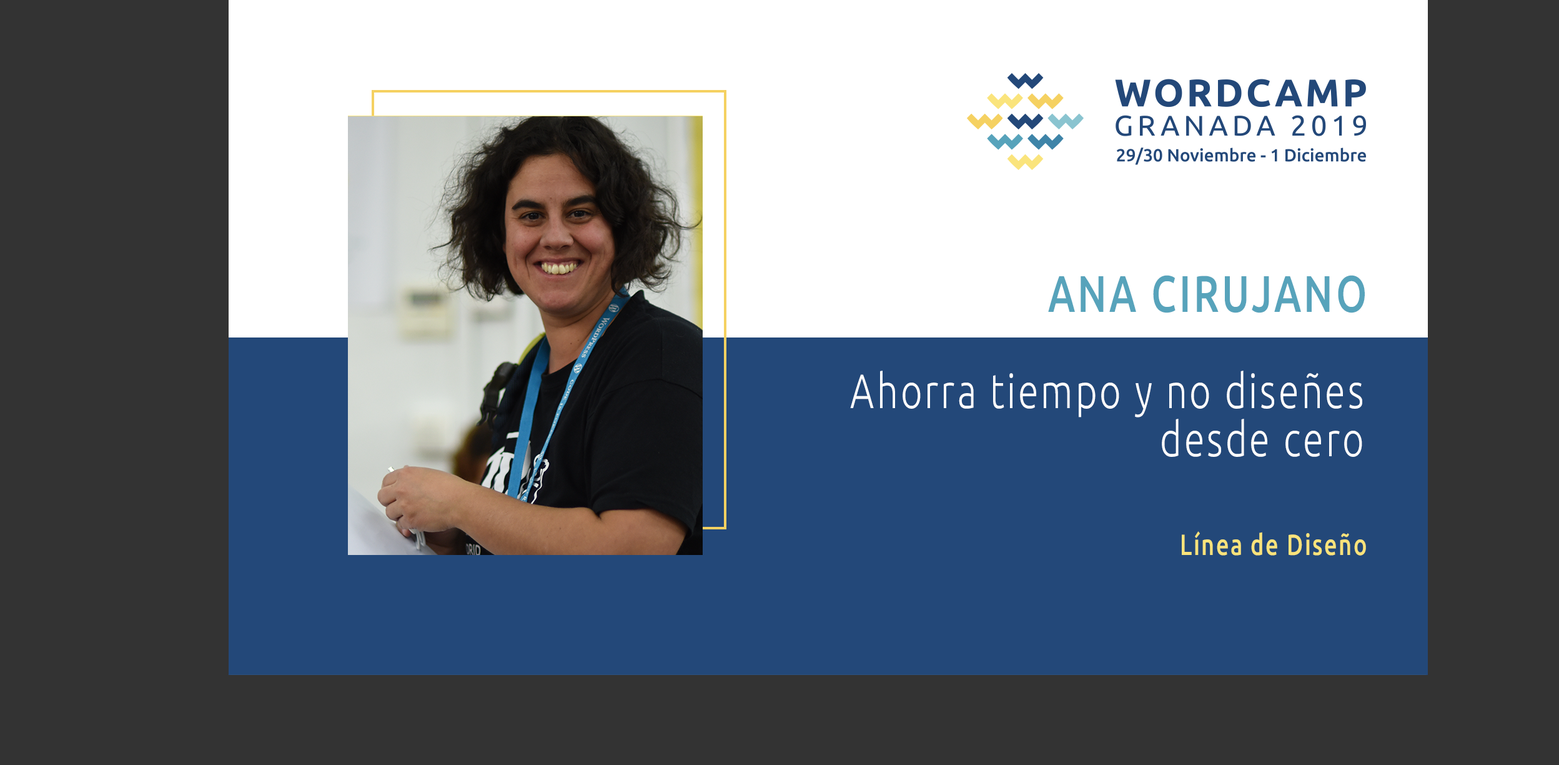
<style>
.page{position:relative;width:1559px;height:765px;background:#333333}
.page>*{position:absolute;margin:0}
.t1{font:51.4px "Ubuntu-Medium";letter-spacing:0.068em;color:#57a3bb;scale:0.77 1}
.t2{font:48.2px/48.2px "Ubuntu-Light";letter-spacing:0.068em;color:#ffffff;scale:0.77 1}
.t3{font:29.2px "Ubuntu-Medium";letter-spacing:0.068em;color:#f9e37b;scale:0.77 1}
</style>
<div class="page">
<p class="t1" style="left:1048px;top:275px;width:317px;height:38px">ANA CIRUJANO</p>
<p class="t2" style="left:850px;top:370px;width:513px;height:87px;text-align:right">Ahorra tiempo y no diseñes desde cero</p>
<p class="t3" style="left:1182px;top:531px;width:184px;height:24px">Línea de Diseño</p>
</div>
